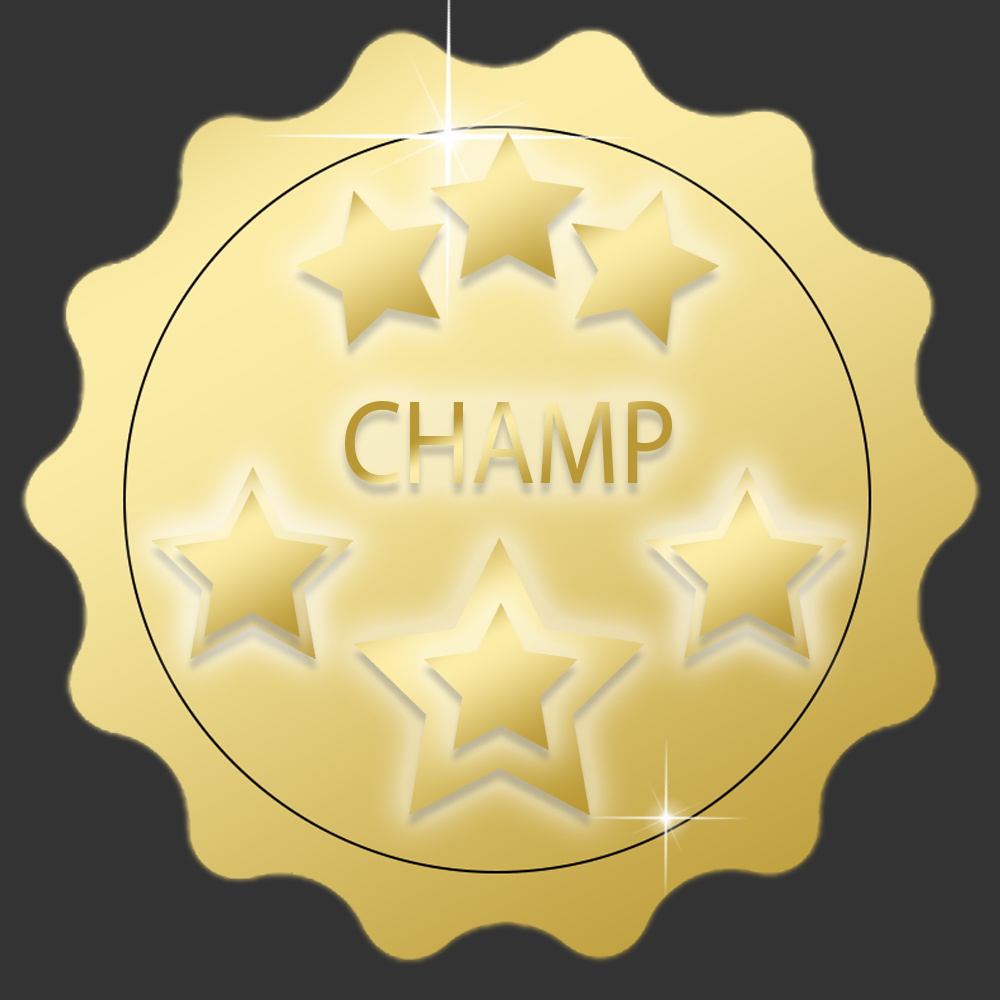
<style>
.page{position:relative;width:1000px;height:1000px;background:#333333}
.page>*{position:absolute;margin:0}
.t1{font:120px "MyriadPro-Regular";scale:0.88 1}
</style>
<div class="page">
<p class="t1" style="left:345px;top:401px;width:327px;height:83px">CHAMP</p>
</div>
